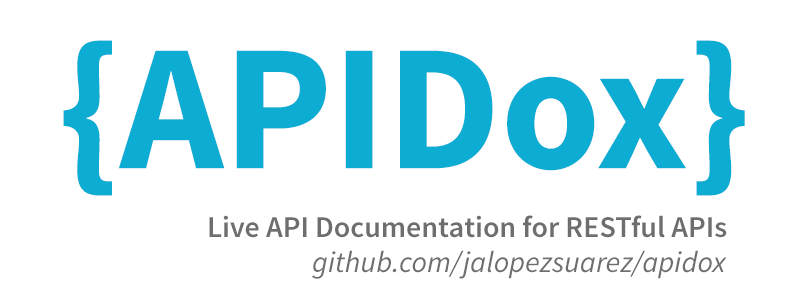
<style>
.page{position:relative;width:800px;height:300px;background:#ffffff}
.page>*{position:absolute;margin:0}
.t1{font:180px "SourceSansPro-Bold";color:#0dadd3}
.t2{font:30px "SourceSansPro-Semibold";color:#6e6e6e}
.t3{font:30px "SourceSansPro-It";color:#6e6e6e}
</style>
<div class="page">
<p class="t1" style="left:63px;top:40px;width:682px;height:156px">{APIDox}</p>
<p class="t2" style="left:209px;top:215px;width:518px;height:23px">Live API Documentation for RESTful APIs</p>
<p class="t3" style="left:312px;top:250px;width:415px;height:29px">github.com/jalopezsuarez/apidox</p>
</div>
